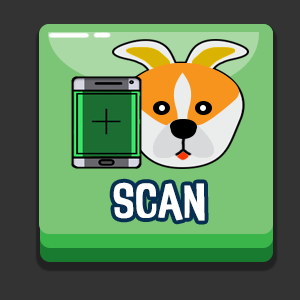
<style>
.page{position:relative;width:300px;height:300px;background:#333333}
.page>*{position:absolute;margin:0}
.t1{font:50px "InsideOut";color:#ffffff}
</style>
<div class="page">
<p class="t1" style="left:113px;top:182px;width:92px;height:39px">scan</p>
</div>
